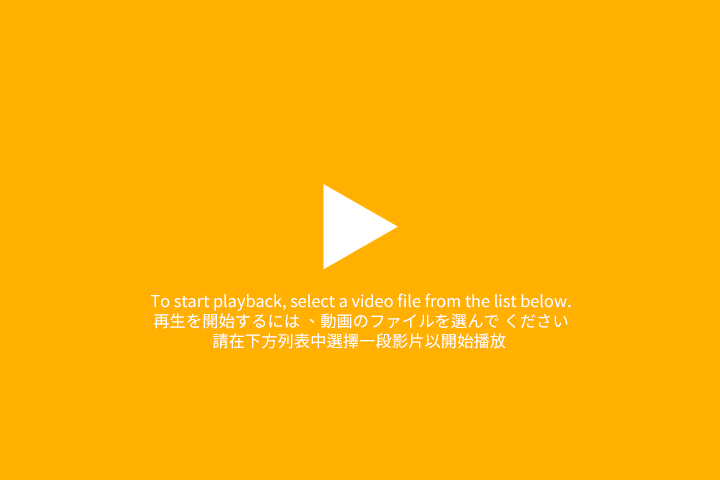
<style>
.page{position:relative;width:720px;height:480px;background:#ffb000}
.page>*{position:absolute;margin:0}
.t1{font:16.3px/20px "TaipeiSansTCBeta-Regular";color:#ffffff}
</style>
<div class="page">
<p class="t1" style="left:151px;top:293px;width:420px;height:56px;text-align:center">To start playback, select a video file from the list below.<br>再生を開始するには 、動画のファイルを選んで ください<br>請在下方列表中選擇一段影片以開始播放</p>
</div>
